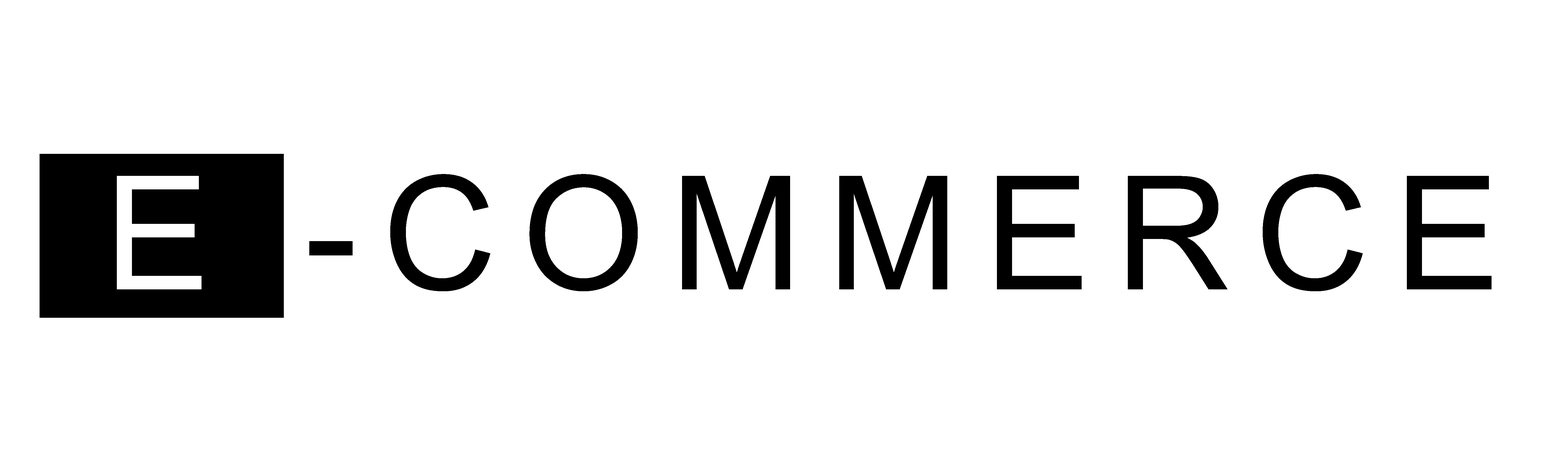
<style>
.page{position:relative;width:1568px;height:470px;background:#ffffff}
.page>*{position:absolute;margin:0}
.t1{font:158.2px "ArialMT";letter-spacing:0.16em;color:#000000}
.t2{font:158.2px "ArialMT";letter-spacing:0.16em;color:#ffffff}
</style>
<div class="page">
<p class="t1" style="left:117px;top:174px;width:1375px;height:118px"><span class="t2">E</span> -COMMERCE</p>
</div>
